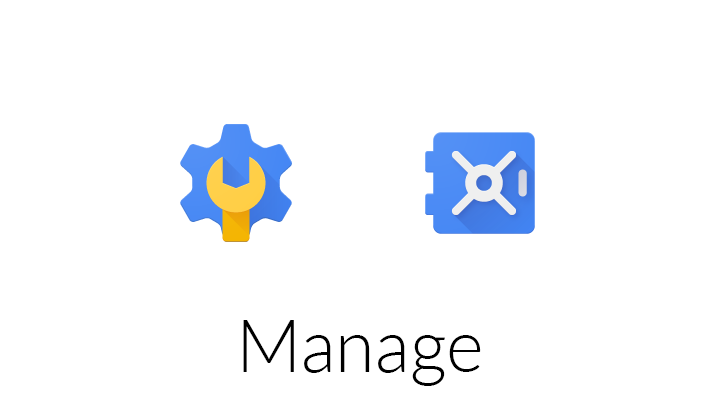
<style>
.page{position:relative;width:720px;height:400px;background:#ffffff}
.page>*{position:absolute;margin:0}
.t1{font:72px "Lato-Light";color:#000000}
</style>
<div class="page">
<p class="t1" style="left:243px;top:320px;width:238px;height:66px">Manage</p>
</div>
